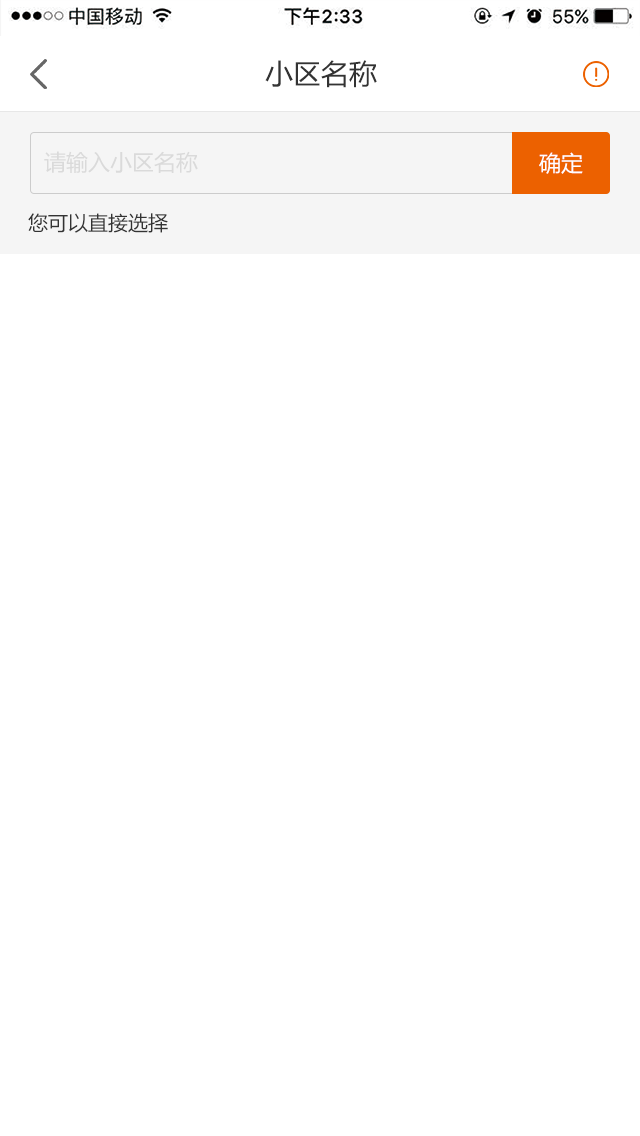
<style>
.page{position:relative;width:640px;height:1136px;background:#ffffff}
.page>*{position:absolute;margin:0}
.t1{font:28px "MicrosoftYaHei";color:#333333}
.t2{font:22px "MicrosoftYaHei";color:#dadada}
.t3{font:22px "MicrosoftYaHei";color:#ffffff}
.t4{font:20px "MicrosoftYaHei";color:#333333}
</style>
<div class="page">
<p class="t1" style="left:265px;top:60px;width:112px;height:28px">小区名称</p>
<p class="t2" style="left:44px;top:151px;width:154px;height:22px">请输入小区名称</p>
<p class="t3" style="left:539px;top:152px;width:44px;height:22px">确定</p>
<p class="t4" style="left:28px;top:213px;width:140px;height:20px">您可以直接选择</p>
</div>
